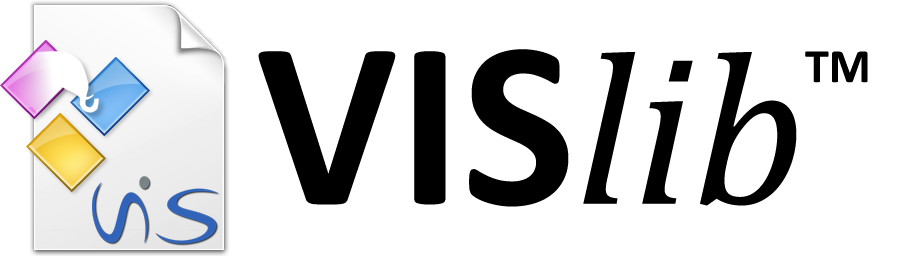
<style>
.page{position:relative;width:900px;height:256px;background:#ffffff}
.page>*{position:absolute;margin:0}
.t1{font:240px "Calibri-Bold";color:#000000}
.t2{font:217px "Cambria-Italic";color:#000000}
</style>
<div class="page">
<p class="t1" style="left:258px;top:49px;width:539px;height:158px">VIS<span class="t2">lib</span></p>
</div>
